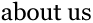
<style>
.page{position:relative;width:93px;height:23px;background:#ffffff}
.page>*{position:absolute;margin:0}
.t1{font:24px "Georgia";color:#000000}
</style>
<div class="page">
<p class="t1" style="left:1px;top:1px;width:90px;height:20px">about us</p>
</div>
